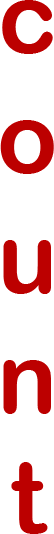
<style>
.page{position:relative;width:54px;height:534px;background:#ffffff}
.page>*{position:absolute;margin:0}
.t1{font:100px "ArialRoundedMTBold";color:#bc0000}
</style>
<div class="page">
<p class="t1" style="left:0px;top:0px;width:54px;height:534px;text-align:center">c<br>o<br>u<br>n<br>t</p>
</div>
